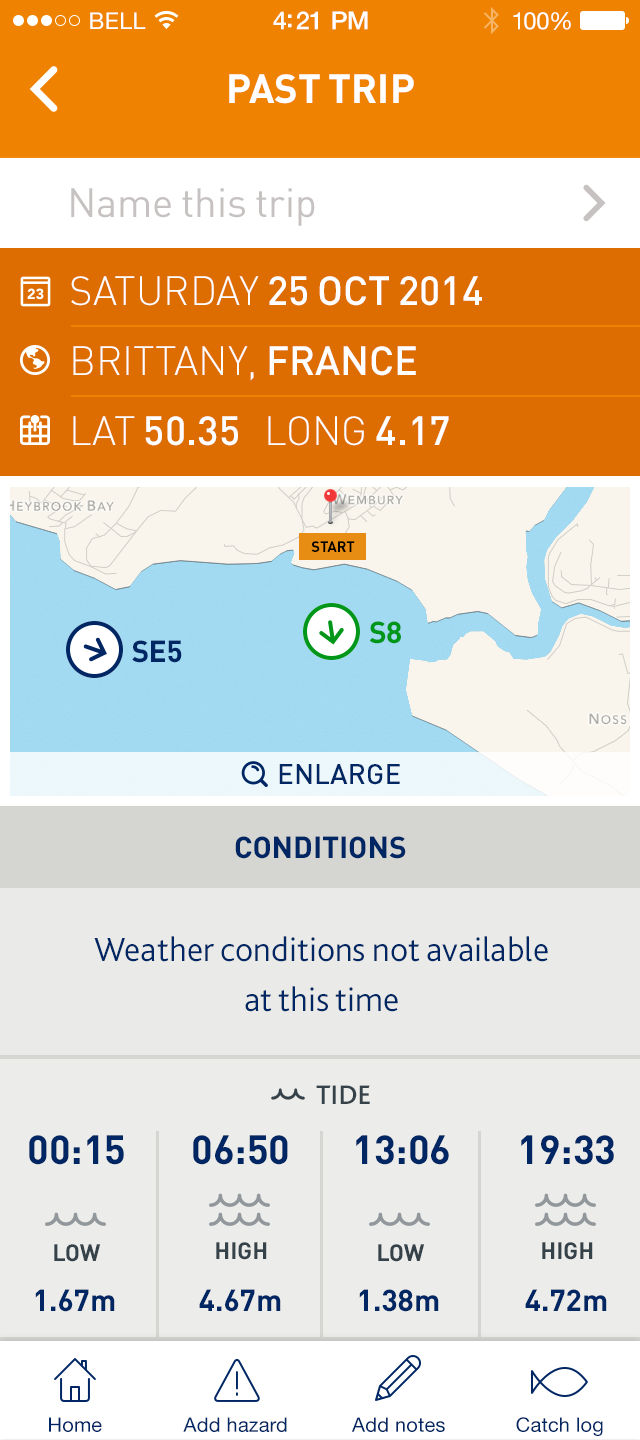
<style>
.page{position:relative;width:640px;height:1440px}
.page>*{position:absolute;margin:0}
.t1{font:23px "HelveticaNeue";letter-spacing:0.02em;color:#ffffff}
.t2{font:25px "HelveticaNeue-Medium";letter-spacing:-0.02em;color:#ffffff}
.t3{font:24px "HelveticaNeue";letter-spacing:-0.02em;color:#ffffff}
.t4{font:40px "DIN-Bold";color:#ffffff;text-transform:uppercase}
.t5{font:40px "DIN-Regular";color:#c6c2c1}
.t6{font:40px/70px "DIN-Medium";color:#ffffff;text-transform:uppercase}
.t7{font:40px/70px "DIN-Light";color:#ffffff;text-transform:uppercase}
.t8{font:15px "DIN-Bold";letter-spacing:-0.015em;color:#000000;text-transform:uppercase}
.t9{font:30px "DIN-Bold";letter-spacing:-0.015em;color:#009619;text-transform:uppercase}
.t10{font:30px "DIN-Bold";letter-spacing:-0.015em;color:#002663;text-transform:uppercase}
.t11{font:28px "DIN-Medium";color:#002663;text-transform:uppercase}
.t12{font:30px "DIN-Bold";color:#002663;text-transform:uppercase}
.t13{font:35px/50px "Bliss2-Light";color:#002663}
.t14{font:28px "Bliss2-Medium";color:#36424a;text-transform:uppercase}
.t15{font:40px "DIN-Bold";color:#002663;text-transform:uppercase}
.t16{font:23.2px "DIN-Bold";color:#36424a;text-transform:uppercase}
.t17{font:30px "DIN-Bold";color:#002663}
.t18{font:20px "HelveticaNeue";letter-spacing:0.01em;color:#002663}
</style>
<div class="page">
<p class="t1" style="left:90px;top:12px;width:56px;height:17px">BELL</p>
<p class="t2" style="left:273px;top:11px;width:95px;height:19px">4:21 PM</p>
<p class="t3" style="left:513px;top:12px;width:58px;height:18px">100%</p>
<p class="t4" style="left:229px;top:74px;width:185px;height:30px">past trip</p>
<p class="t5" style="left:71px;top:188px;width:244px;height:38px">Name this trip</p>
<p class="t6" style="left:71px;top:276px;width:411px;height:170px"><span class="t7">Saturday </span>25 Oct 2014<br><span class="t7">Brittany, </span>France<br><span class="t7">LAT </span>50.35<span class="t7">   LONG </span>4.17</p>
<p class="t8" style="left:311px;top:541px;width:44px;height:11px">START</p>
<p class="t9" style="left:369px;top:621px;width:32px;height:23px">S8</p>
<p class="t10" style="left:132px;top:640px;width:50px;height:23px">SE5</p>
<p class="t11" style="left:279px;top:764px;width:121px;height:21px">enlarge</p>
<p class="t12" style="left:235px;top:836px;width:171px;height:23px">conditions</p>
<p class="t13" style="left:94px;top:936px;width:454px;height:76px;text-align:center">Weather conditions not available<br>at this time</p>
<p class="t14" style="left:316px;top:1085px;width:54px;height:19px">tide</p>
<p class="t15" style="left:29px;top:1135px;width:95px;height:30px">00:15</p>
<p class="t15" style="left:193px;top:1135px;width:95px;height:30px">06:50</p>
<p class="t15" style="left:356px;top:1135px;width:93px;height:30px">13:06</p>
<p class="t15" style="left:521px;top:1135px;width:93px;height:30px">19:33</p>
<p class="t16" style="left:54px;top:1244px;width:47px;height:18px">LOW</p>
<p class="t16" style="left:216px;top:1242px;width:51px;height:18px">high</p>
<p class="t16" style="left:378px;top:1244px;width:47px;height:18px">LOW</p>
<p class="t16" style="left:542px;top:1242px;width:51px;height:18px">high</p>
<p class="t17" style="left:35px;top:1289px;width:80px;height:23px">1.67m</p>
<p class="t17" style="left:199px;top:1289px;width:82px;height:23px">4.67m</p>
<p class="t17" style="left:359px;top:1289px;width:80px;height:23px">1.38m</p>
<p class="t17" style="left:525px;top:1289px;width:82px;height:22px">4.72m</p>
<p class="t18" style="left:49px;top:1417px;width:53px;height:15px">Home</p>
<p class="t18" style="left:183px;top:1417px;width:104px;height:15px">Add hazard</p>
<p class="t18" style="left:352px;top:1417px;width:93px;height:15px">Add notes</p>
<p class="t18" style="left:516px;top:1417px;width:87px;height:19px">Catch log</p>
</div>
